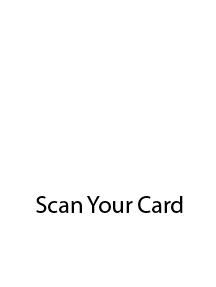
<style>
.page{position:relative;width:216px;height:287px;background:#ffffff}
.page>*{position:absolute;margin:0}
.t1{font:24px "MyriadPro-Regular";color:#000000}
</style>
<div class="page">
<p class="t1" style="left:36px;top:196px;width:147px;height:17px">Scan Your Card</p>
</div>
